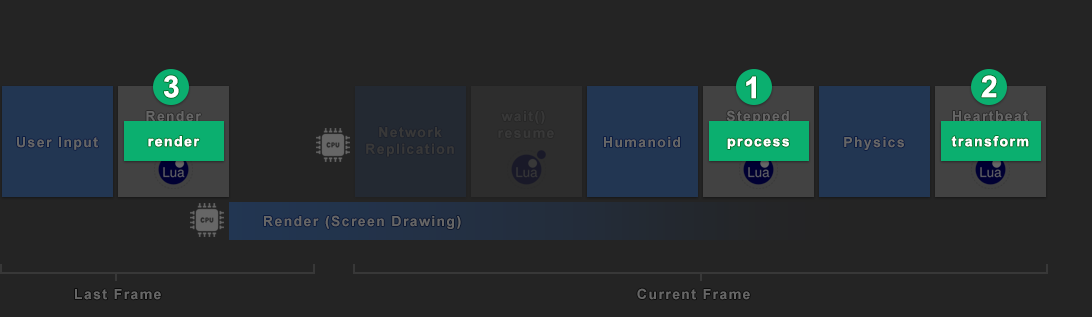
<style>
.page{position:relative;width:1092px;height:317px;background:#242424}
.page>*{position:absolute;margin:0}
.t1{font:30px "Arial-BoldMT";letter-spacing:0.1em;color:#ffffff}
.t2{font:14px "Arial-BoldMT";letter-spacing:0.1em;color:#383838}
.t3{font:14px "Arial-BoldMT";letter-spacing:0.1em;color:#666666}
.t4{font:14px "Arial-BoldMT";letter-spacing:0.1em;color:#ffffff}
</style>
<div class="page">
<p class="t1" style="left:164px;top:75px;width:15px;height:23px">3</p>
<p class="t1" style="left:746px;top:76px;width:10px;height:23px">1</p>
<p class="t1" style="left:981px;top:75px;width:16px;height:23px">2</p>
<p class="t2" style="left:498px;top:111px;width:56px;height:27px;text-align:center">wait() <br>resume</p>
<p class="t3" style="left:726px;top:110px;width:63px;height:14px">Stepped</p>
<p class="t3" style="left:953px;top:111px;width:75px;height:11px">Heartbeat</p>
<p class="t3" style="left:17px;top:137px;width:81px;height:13px">User Input</p>
<p class="t4" style="left:148px;top:136px;width:52px;height:11px">render</p>
<p class="t2" style="left:366px;top:127px;width:88px;height:30px;text-align:center">Network<br>Replication</p>
<p class="t3" style="left:604px;top:137px;width:76px;height:11px">Humanoid</p>
<p class="t3" style="left:844px;top:137px;width:60px;height:13px">Physics</p>
<p class="t4" style="left:951px;top:136px;width:78px;height:11px">transform</p>
<p class="t4" style="left:727px;top:138px;width:62px;height:11px">process</p>
<p class="t3" style="left:264px;top:215px;width:197px;height:14px">Render (Screen Drawing)</p>
<p class="t3" style="left:75px;top:289px;width:86px;height:11px">Last Frame</p>
<p class="t3" style="left:637px;top:288px;width:113px;height:12px">Current Frame</p>
</div>
